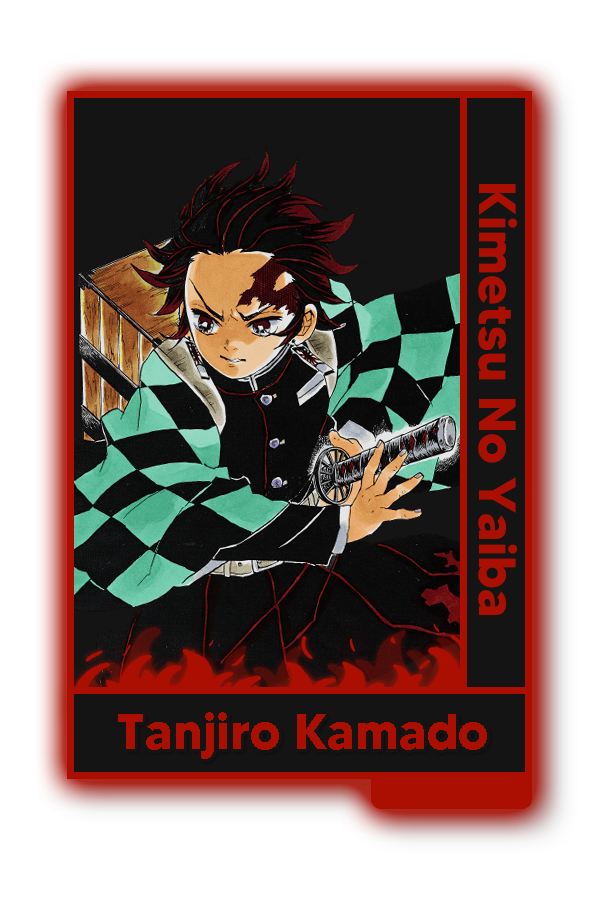
<style>
.page{position:relative;width:600px;height:900px;background:#ffffff}
.page>*{position:absolute;margin:0}
.t1{font:52px "MADETOMMY-Bold";color:#ab0f01}
.t2{font:50.5px "MADETOMMY-Bold";color:#ab0f01}
</style>
<div class="page">
<p class="t1" style="left:478px;top:184px;width:40px;height:431px;rotate:90deg">Kimetsu No Yaiba</p>
<p class="t2" style="left:118px;top:712px;width:369px;height:47px">Tanjiro Kamado</p>
</div>
